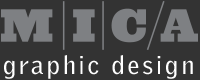
<style>
.page{position:relative;width:200px;height:80px;background:#333333}
.page>*{position:absolute;margin:0}
.t1{font:25px "GriffithGothicRegular";letter-spacing:0.12em;color:#ffffff}
</style>
<div class="page">
<p class="t1" style="left:4px;top:55px;width:189px;height:24px">graphic design</p>
</div>
